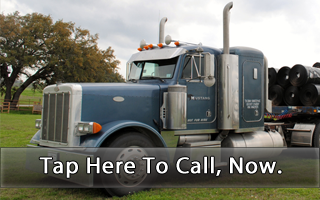
<style>
.page{position:relative;width:320px;height:200px}
.page>*{position:absolute;margin:0}
.t1{font:23px "MyriadPro-Regular";letter-spacing:0.03em;color:#ffffff;font-weight:bold}
</style>
<div class="page">
<p class="t1" style="left:39px;top:156px;width:243px;height:22px">Tap Here To Call, Now.</p>
</div>
